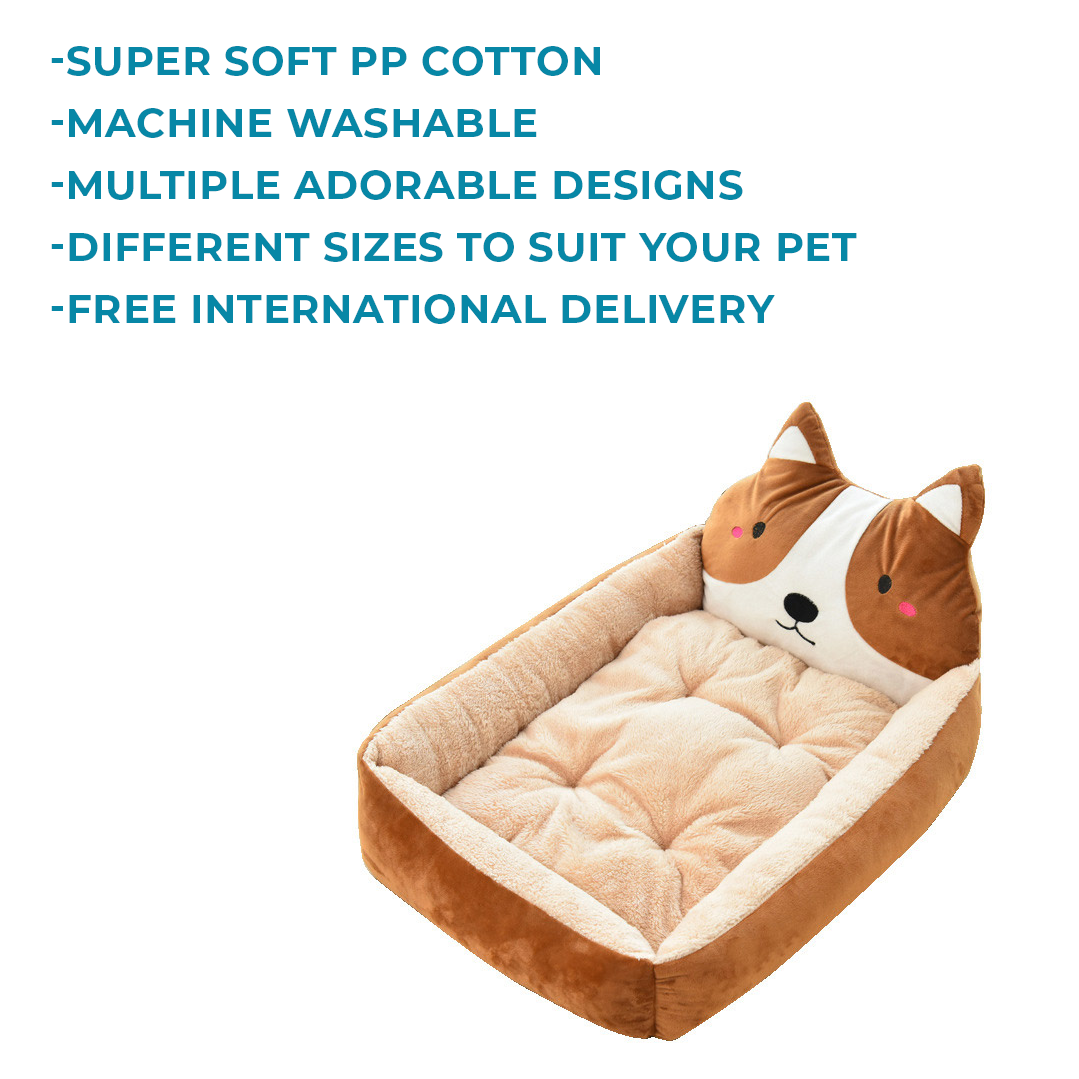
<style>
.page{position:relative;width:1079px;height:1079px;background:#ffffff}
.page>*{position:absolute;margin:0}
.t1{font:40px/62px "Montserrat-Bold";letter-spacing:0.02em;color:#0787a6;text-transform:uppercase}
</style>
<div class="page">
<p class="t1" style="left:51px;top:46px;width:806px;height:278px;text-align:right">-Super soft pp cotton<br>-Machine washable<br>-Multiple adorable designs<br>-different sizes to suit your pet<br>-Free international delivery</p>
</div>
